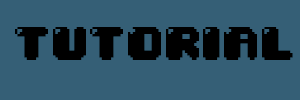
<style>
.page{position:relative;width:300px;height:100px;background:#355f76}
.page>*{position:absolute;margin:0}
.t1{font:40px "04b30";color:#000000}
</style>
<div class="page">
<p class="t1" style="left:15px;top:27px;width:278px;height:33px">TUTORIAL</p>
</div>
